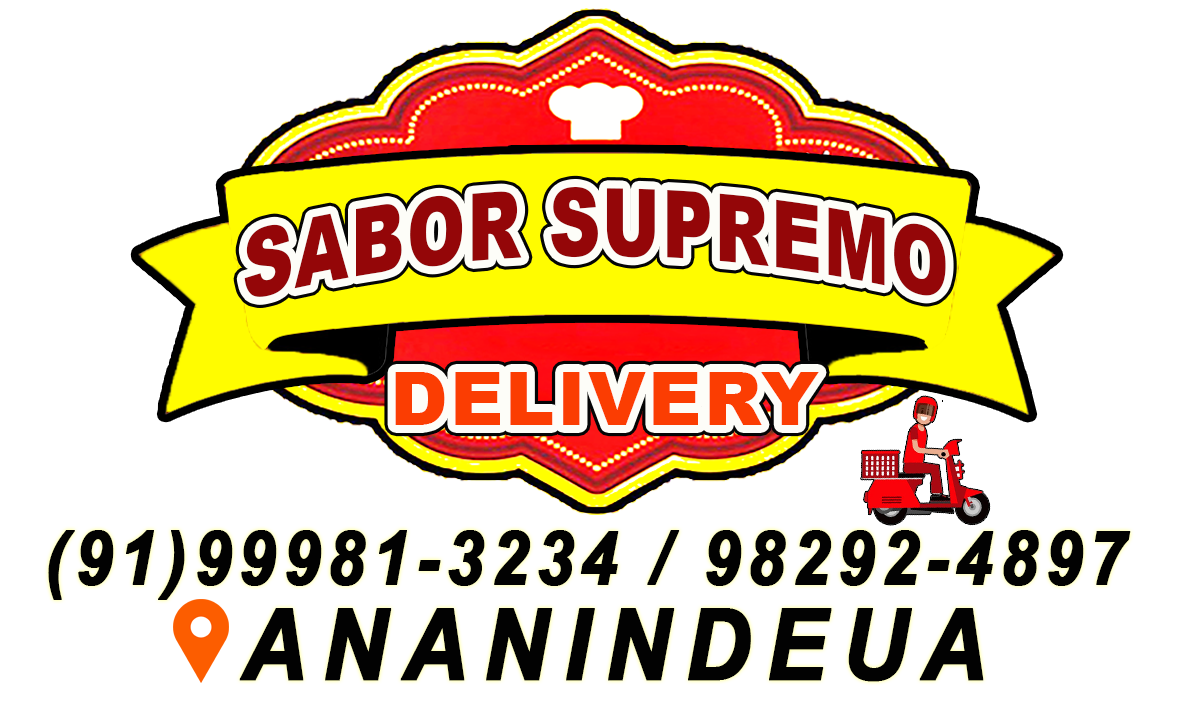
<style>
.page{position:relative;width:1181px;height:709px;background:#ffffff}
.page>*{position:absolute;margin:0}
.t1{font:94px "Arial-Black";letter-spacing:0.03em;color:#940608;text-transform:uppercase;scale:0.74 1}
.t2{font:74.2px "Arial-Black";letter-spacing:0.03em;color:#fb3d02;text-transform:uppercase}
.t3{font:74.9px "Arial-BoldItalicMT";letter-spacing:0.08em;color:#020202;font-weight:bold;scale:0.9 1}
.t4{font:98.5px "Arial-BoldItalicMT";letter-spacing:0.16em;color:#020202;font-weight:bold;scale:0.9 1}
</style>
<div class="page">
<p class="t1" style="left:244px;top:187px;width:702px;height:110px">sabor supremo</p>
<p class="t2" style="left:395px;top:372px;width:424px;height:53px">delivery</p>
<p class="t3" style="left:48px;top:530px;width:1083px;height:70px">(91)99981-3234 / 98292-4897</p>
<p class="t4" style="left:239px;top:608px;width:745px;height:74px">ANANINDEUA</p>
</div>
